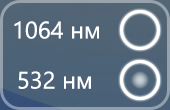
<style>
.page{position:relative;width:170px;height:110px}
.page>*{position:absolute;margin:0}
.t1{font:23.9px "SegoeUI";color:#ffffff}
</style>
<div class="page">
<p class="t1" style="left:14px;top:21px;width:85px;height:18px">1064 нм</p>
<p class="t1" style="left:18px;top:71px;width:73px;height:18px">532 нм</p>
</div>
